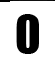
<style>
.page{position:relative;width:55px;height:65px;background:#ffffff}
.page>*{position:absolute;margin:0}
.t1{font:48px "Impact";color:#000000}
</style>
<div class="page">
<p class="t1" style="left:16px;top:13px;width:23px;height:40px">0</p>
</div>
